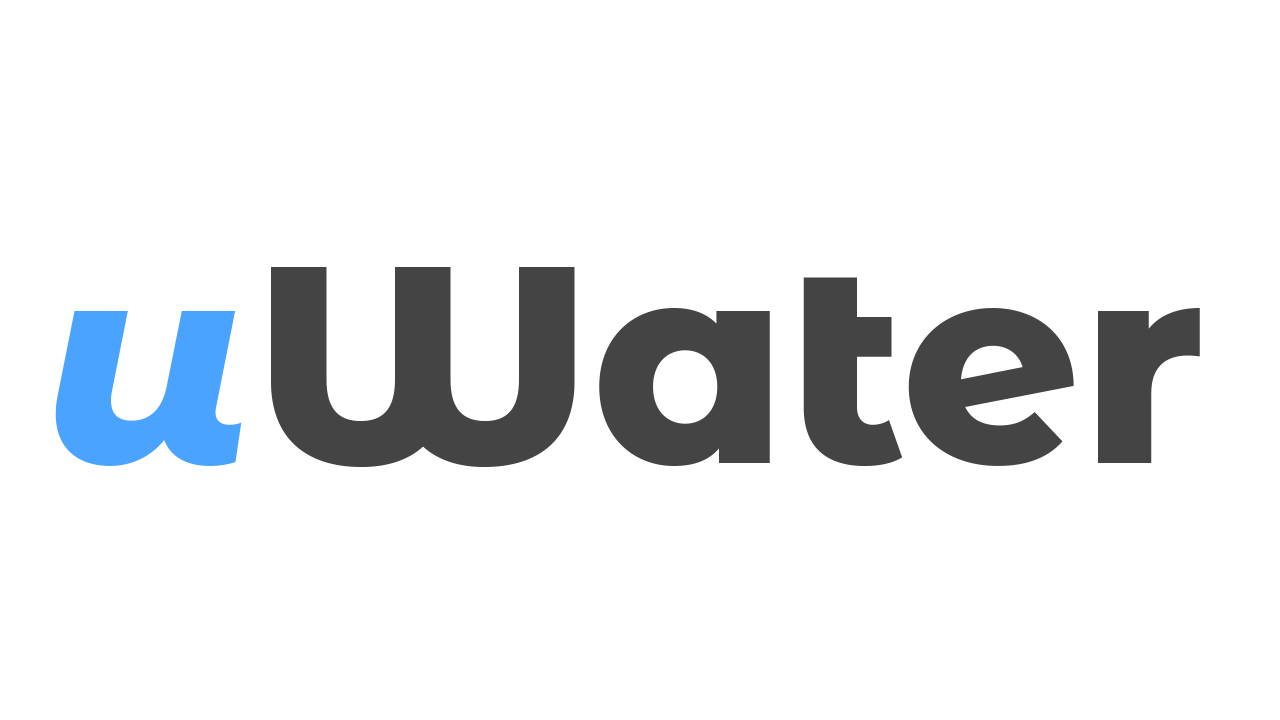
<style>
.page{position:relative;width:1280px;height:720px;background:#ffffff}
.page>*{position:absolute;margin:0}
.t1{font:280px "MontserratAlternates-ExtraBold";color:#444444}
.t2{font:280px "MontserratAlternates-ExtraBoldItalic";color:#4aa3ff}
</style>
<div class="page">
<p class="t1" style="left:55px;top:267px;width:1145px;height:201px"><span class="t2">u</span>Water</p>
</div>
